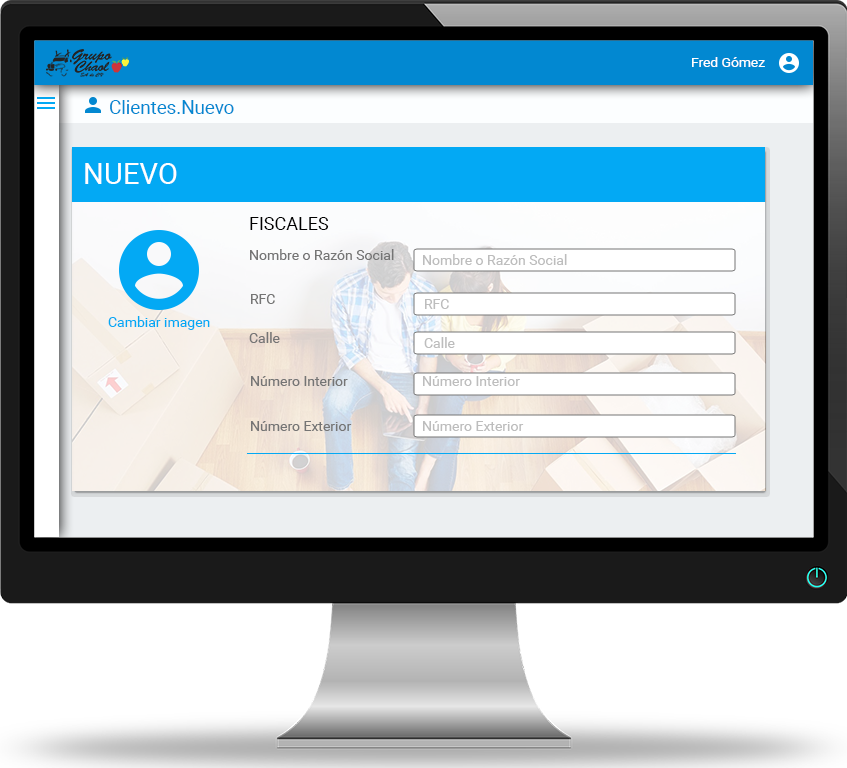
<style>
.page{position:relative;width:847px;height:768px}
.page>*{position:absolute;margin:0}
.t1{font:13.3px "Roboto-Regular";color:#ffffff;scale:1.04 1}
.t2{font:18.6px "Roboto-Regular";color:#0288d1}
.t3{font:29.1px "Roboto-Regular";color:#ffffff}
.t4{font:18px "Roboto-Regular";color:#000000}
.t5{font:14px "Roboto-Regular";color:#757575}
.t6{font:14px "Roboto-Regular";color:#bdbdbd}
.t7{font:14px "Roboto-Regular";color:#03a9f4}
.t8{font:14.2px "Roboto-Regular";color:#bdbdbd}
</style>
<div class="page">
<p class="t1" style="left:692px;top:57px;width:73px;height:10px">Fred Gómez</p>
<p class="t2" style="left:110px;top:100px;width:124px;height:14px">Clientes.Nuevo</p>
<p class="t3" style="left:85px;top:163px;width:92px;height:21px">NUEVO</p>
<p class="t4" style="left:250px;top:217px;width:79px;height:13px">FISCALES</p>
<p class="t5" style="left:250px;top:249px;width:144px;height:11px">Nombre o Razón Social</p>
<p class="t6" style="left:423px;top:254px;width:144px;height:11px">Nombre o Razón Social</p>
<p class="t5" style="left:251px;top:294px;width:24px;height:10px">RFC</p>
<p class="t6" style="left:425px;top:299px;width:24px;height:10px">RFC</p>
<p class="t7" style="left:108px;top:316px;width:102px;height:14px">Cambiar imagen</p>
<p class="t5" style="left:249px;top:332px;width:31px;height:11px">Calle</p>
<p class="t6" style="left:424px;top:337px;width:31px;height:11px">Calle</p>
<p class="t5" style="left:251px;top:376px;width:97px;height:10px">Número Interior</p>
<p class="t8" style="left:423px;top:376px;width:97px;height:10px">Número Interior</p>
<p class="t5" style="left:251px;top:421px;width:101px;height:10px">Número Exterior</p>
<p class="t6" style="left:423px;top:421px;width:101px;height:10px">Número Exterior</p>
</div>
